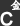
<style>
.page{position:relative;width:20px;height:26px;background:#333333}
.page>*{position:absolute;margin:0}
.t1{font:12px "DFKaiShu-SB-Estd-BF";color:#ffffff;font-weight:bold}
.t2{font:18px "ArialMT";color:#ffffff;font-weight:bold}
</style>
<div class="page">
<p class="t1" style="left:10px;top:0px;width:12px;height:10px">金</p>
<p class="t2" style="left:0px;top:11px;width:13px;height:15px">C</p>
</div>
